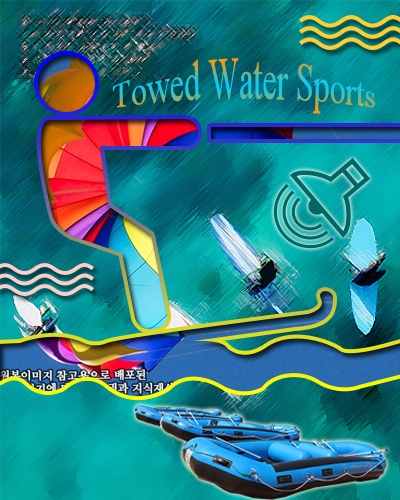
<style>
.page{position:relative;width:400px;height:500px}
.page>*{position:absolute;margin:0}
.t1{font:32.1px "TimesNewRomanPSMT"}
</style>
<div class="page">
<p class="t1" style="left:112px;top:58px;width:263px;height:56px;text-align:center">Towed Water Sports</p>
</div>
